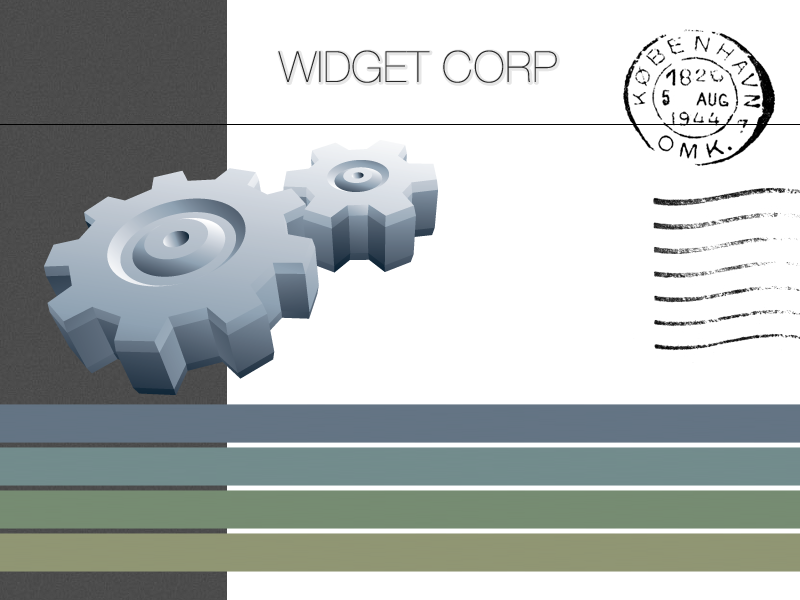
<style>
.page{position:relative;width:800px;height:600px;background:#ffffff}
.page>*{position:absolute;margin:0}
.t1{font:43px "HelveticaNeue-UltraLight";letter-spacing:0.02em;color:#2a2a2a;text-transform:uppercase}
</style>
<div class="page">
<p class="t1" style="left:278px;top:50px;width:279px;height:33px">Widget Corp</p>
</div>
